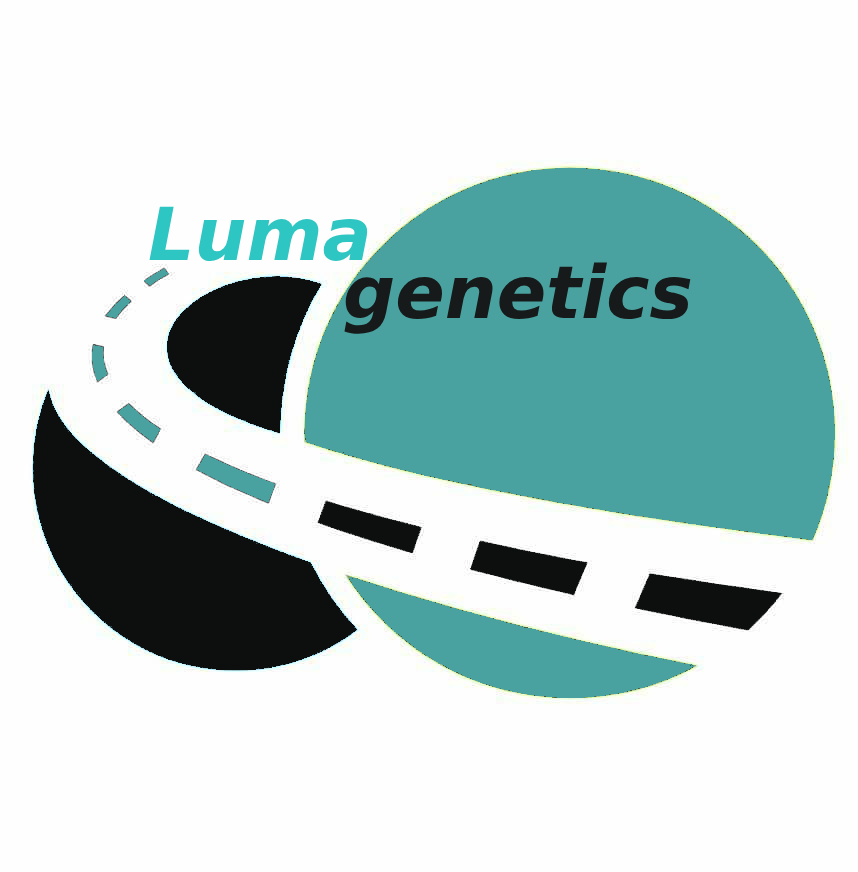
<style>
.page{position:relative;width:858px;height:872px;background:#fefefe}
.page>*{position:absolute;margin:0}
.t1{font:73px "DejaVuSans-BoldOblique";color:#2dc6c2}
.t2{font:73px "DejaVuSans-BoldOblique";color:#171a1a}
</style>
<div class="page">
<p class="t1" style="left:149px;top:206px;width:219px;height:56px">Luma</p>
<p class="t2" style="left:344px;top:262px;width:347px;height:72px">genetics</p>
</div>
